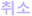
<style>
.page{position:relative;width:32px;height:16px;background:#ffffff}
.page>*{position:absolute;margin:0}
.t1{font:15.2px "MalgunGothicBold";color:#bab2ff}
</style>
<div class="page">
<p class="t1" style="left:1px;top:1px;width:29px;height:15px">취소</p>
</div>
